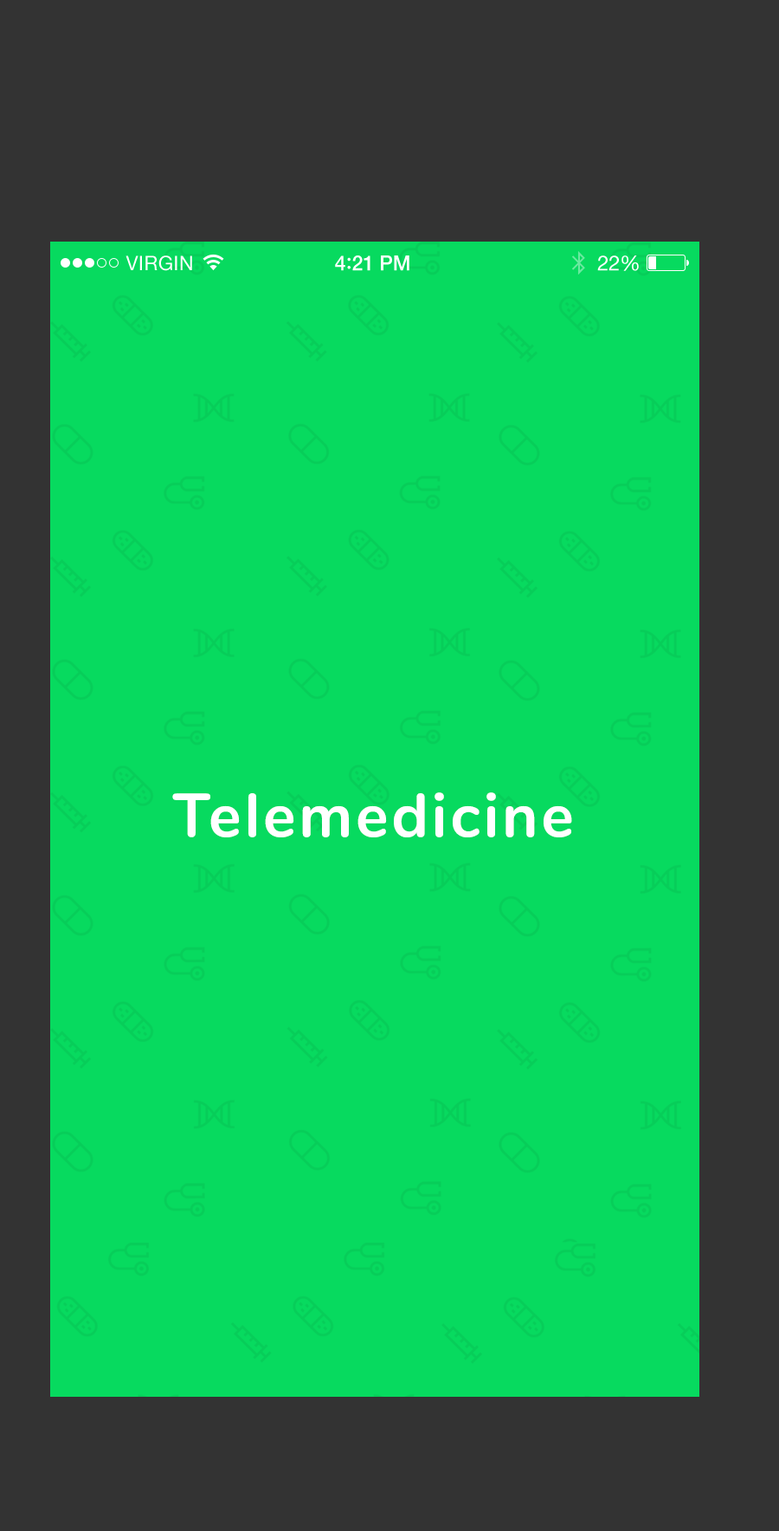
<style>
.page{position:relative;width:779px;height:1531px;background:#07da5f}
.page>*{position:absolute;margin:0}
.t1{font:61.6px "Nunito-Bold";letter-spacing:0.05em;color:#ffffff}
</style>
<div class="page">
<p class="t1" style="left:172px;top:792px;width:400px;height:45px">Telemedicine</p>
</div>
